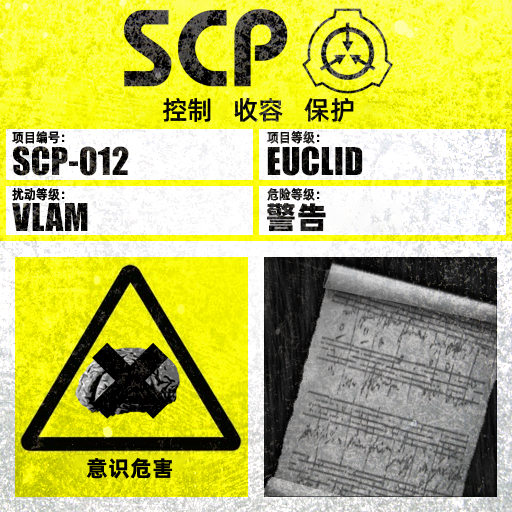
<style>
.page{position:relative;width:512px;height:512px}
.page>*{position:absolute;margin:0}
.t1{font:26px "AlibabaPuHuiTiM";color:#000000}
.t2{font:13.3px "AlibabaPuHuiTiM";letter-spacing:0.02em;color:#000000;scale:0.9 1}
.t3{font:13.3px "AlibabaPuHuiTiM";letter-spacing:0.02em;scale:0.9 1}
.t4{font:30.3px "AlibabaPuHuiTiH";letter-spacing:0.02em}
.t5{font:22px "AlibabaPuHuiTiB";letter-spacing:0.02em;color:#000000}
</style>
<div class="page">
<p class="t1" style="left:163px;top:97px;width:191px;height:26px">控制   收容   保护</p>
<p class="t2" style="left:12px;top:131px;width:53px;height:13px">项目编号：</p>
<p class="t3" style="left:267px;top:131px;width:53px;height:13px">项目等级：</p>
<p class="t2" style="left:12px;top:188px;width:53px;height:13px">扰动等级：</p>
<p class="t3" style="left:267px;top:188px;width:53px;height:13px">危险等级：</p>
<p class="t4" style="left:267px;top:203px;width:59px;height:29px">警告</p>
<p class="t5" style="left:86px;top:458px;width:87px;height:21px">意识危害</p>
</div>
